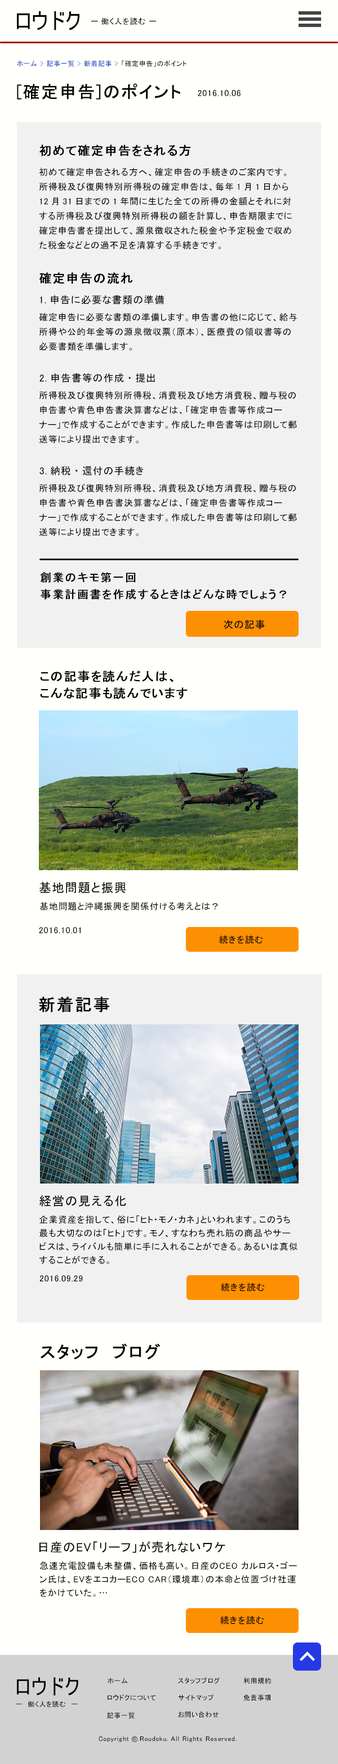
<style>
.page{position:relative;width:338px;height:1764px;background:#f1f1f1}
.page>*{position:absolute;margin:0}
.t1{font:22.5px "MS-UIGothic";letter-spacing:0.01em;color:#000000}
.t2{font:7.9px "MS-PGothic";letter-spacing:0.05em;color:#000000}
.t3{font:6.7px/16.9px "MS-PGothic";letter-spacing:0.05em;color:#0a39be}
.t4{font:6.7px/16.9px "MS-PGothic";letter-spacing:0.05em;color:#000000}
.t5{font:6.7px/16.9px "MS-PGothic";letter-spacing:0.05em;color:#000000;text-decoration:underline}
.t6{font:16.9px "MS-PGothic";letter-spacing:0.05em;color:#000000;font-weight:bold}
.t7{font:9px "MS-PGothic";letter-spacing:0.05em;color:#000000}
.t8{font:12.4px "MS-PGothic";letter-spacing:0.05em;color:#000000;font-weight:bold}
.t9{font:9px/14.6px "MS-PGothic";letter-spacing:0.05em;color:#000000}
.t10{font:10.1px "MS-PGothic";letter-spacing:0.05em;color:#000000}
.t11{font:11.2px "MS-PGothic";letter-spacing:0.05em;color:#000000;font-weight:bold}
.t12{font:12.4px/16.9px "MS-PGothic";letter-spacing:0.05em;color:#000000;font-weight:bold}
.t13{font:12.4px "MS-PGothic";letter-spacing:0.05em;color:#000000}
.t14{font:9px/13.5px "MS-PGothic";letter-spacing:0.05em;color:#000000}
.t15{font:21.4px "MS-UIGothic";letter-spacing:0.05em;color:#000000}
.t16{font:6.8px "MS-PGothic";letter-spacing:0.05em;color:#000000}
.t17{font:6.8px "MS-PGothic";letter-spacing:0.05em}
</style>
<div class="page">
<p class="t1" style="left:17px;top:11px;width:62px;height:19px">ロウドク</p>
<p class="t2" style="left:91px;top:17px;width:65px;height:8px">ー 働く人を読む ー</p>
<p class="t3" style="left:17px;top:60px;width:170px;height:7px">ホーム &gt; 記事一覧 &gt; 新着記事 &gt; <span class="t4">「確定申告」のポイント<br></span><span class="t5"> &gt;</span></p>
<p class="t6" style="left:17px;top:83px;width:164px;height:17px">[確定申告]のポイント</p>
<p class="t7" style="left:197px;top:90px;width:43px;height:6px">2016.10.06</p>
<p class="t8" style="left:39px;top:145px;width:152px;height:11px">初めて確定申告をされる方</p>
<p class="t9" style="left:39px;top:168px;width:252px;height:81px">初めて確定申告される方へ、確定申告の手続きのご案内です。<br>所得税及び復興特別所得税の確定申告は、毎年1月1日から12月31日までの1年間に生じた全ての所得の金額とそれに対する所得税及び復興特別所得税の額を計算し、申告期限までに確定申告書を提出して、源泉徴収された税金や予定税金で収めた税金などとの過不足を清算する手続きです。</p>
<p class="t8" style="left:39px;top:272px;width:94px;height:12px">確定申告の流れ</p>
<p class="t10" style="left:39px;top:295px;width:125px;height:9px">1.申告に必要な書類の準備</p>
<p class="t9" style="left:39px;top:313px;width:258px;height:38px">確定申告に必要な書類の準備します。申告書の他に応じて、給与所得や公的年金等の源泉徴収票（原本）、医療費の領収書等の必要書類を準備します。</p>
<p class="t10" style="left:39px;top:373px;width:116px;height:9px">2.申告書等の作成・提出</p>
<p class="t9" style="left:39px;top:391px;width:257px;height:52px">所得税及び復興特別所得税、消費税及び地方消費税、贈与税の申告書や青色申告書決算書などは、「確定申告書等作成コーナー」で作成することができます。作成した申告書等は印刷して郵送等により提出できます。</p>
<p class="t10" style="left:39px;top:466px;width:104px;height:9px">3.納税・還付の手続き</p>
<p class="t9" style="left:39px;top:484px;width:257px;height:52px">所得税及び復興特別所得税、消費税及び地方消費税、贈与税の申告書や青色申告書決算書などは、「確定申告書等作成コーナー」で作成することができます。作成した申告書等は印刷して郵送等により提出できます。</p>
<p class="t11" style="left:40px;top:572px;width:246px;height:28px">創業のキモ第一回<br>事業計画書を作成するときはどんな時でしょう？</p>
<p class="t10" style="left:223px;top:619px;width:41px;height:10px">次の記事</p>
<p class="t12" style="left:40px;top:670px;width:147px;height:29px">この記事を読んだ人は、<br>こんな記事も読んでいます</p>
<p class="t13" style="left:39px;top:881px;width:87px;height:12px">基地問題と振興</p>
<p class="t7" style="left:39px;top:902px;width:179px;height:9px">基地問題と沖縄振興を関係付ける考えとは？</p>
<p class="t7" style="left:39px;top:927px;width:41px;height:7px">2016.10.01</p>
<p class="t7" style="left:219px;top:935px;width:44px;height:9px">続きを読む</p>
<p class="t6" style="left:39px;top:996px;width:70px;height:16px">新着記事</p>
<p class="t13" style="left:39px;top:1195px;width:87px;height:12px">経営の見える化</p>
<p class="t14" style="left:39px;top:1215px;width:258px;height:49px">企業資産を指して、俗に「ヒト・モノ・カネ」といわれます。このうち最も大切なのは「ヒト」です。モノ、すなわち売れ筋の商品やサービスは、ライバルも簡単に手に入れることができる。あるいは真似することができる。</p>
<p class="t7" style="left:39px;top:1275px;width:44px;height:7px">2016.09.29</p>
<p class="t7" style="left:220px;top:1283px;width:44px;height:9px">続きを読む</p>
<p class="t6" style="left:40px;top:1343px;width:120px;height:17px">スタッフ　ブログ</p>
<p class="t13" style="left:39px;top:1541px;width:186px;height:12px">日産のEV「リーフ」が売れないワケ</p>
<p class="t14" style="left:39px;top:1562px;width:257px;height:35px">急速充電設備も未整備、価格も高い。日産のCEO カルロス・ゴーン氏は、EVをエコカーECO CAR（環境車）の本命と位置づけ社運をかけていた。…</p>
<p class="t7" style="left:220px;top:1616px;width:44px;height:8px">続きを読む</p>
<p class="t15" style="left:17px;top:1677px;width:61px;height:18px">ロウドク</p>
<p class="t16" style="left:107px;top:1677px;width:20px;height:7px">ホーム</p>
<p class="t16" style="left:178px;top:1677px;width:42px;height:7px">スタッフブログ</p>
<p class="t16" style="left:243px;top:1677px;width:28px;height:7px">利用規約</p>
<p class="t16" style="left:107px;top:1694px;width:48px;height:7px">ロウドクについて</p>
<p class="t16" style="left:178px;top:1694px;width:35px;height:6px">サイトマップ</p>
<p class="t16" style="left:243px;top:1694px;width:28px;height:7px">免責事項</p>
<p class="t16" style="left:16px;top:1701px;width:62px;height:6px">ー　働く人を読む　ー</p>
<p class="t16" style="left:107px;top:1712px;width:27px;height:7px">記事一覧</p>
<p class="t16" style="left:178px;top:1711px;width:40px;height:7px">お問い合わせ</p>
<p class="t16" style="left:98px;top:1736px;width:31px;height:6px">Copyright</p>
<p class="t17" style="left:133px;top:1737px;width:3px;height:4px">c</p>
<p class="t16" style="left:140px;top:1736px;width:96px;height:6px">Roudoku. All Rights Reserved.</p>
</div>
